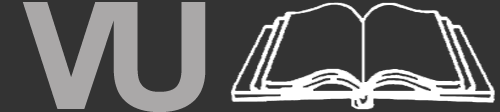
<style>
.page{position:relative;width:500px;height:112px;background:#333333}
.page>*{position:absolute;margin:0}
.t1{font:150px "HelveticaNeue-Bold";letter-spacing:-0.1em;color:#aaa8a8}
</style>
<div class="page">
<p class="t1" style="left:22px;top:2px;width:184px;height:110px">VU</p>
</div>
